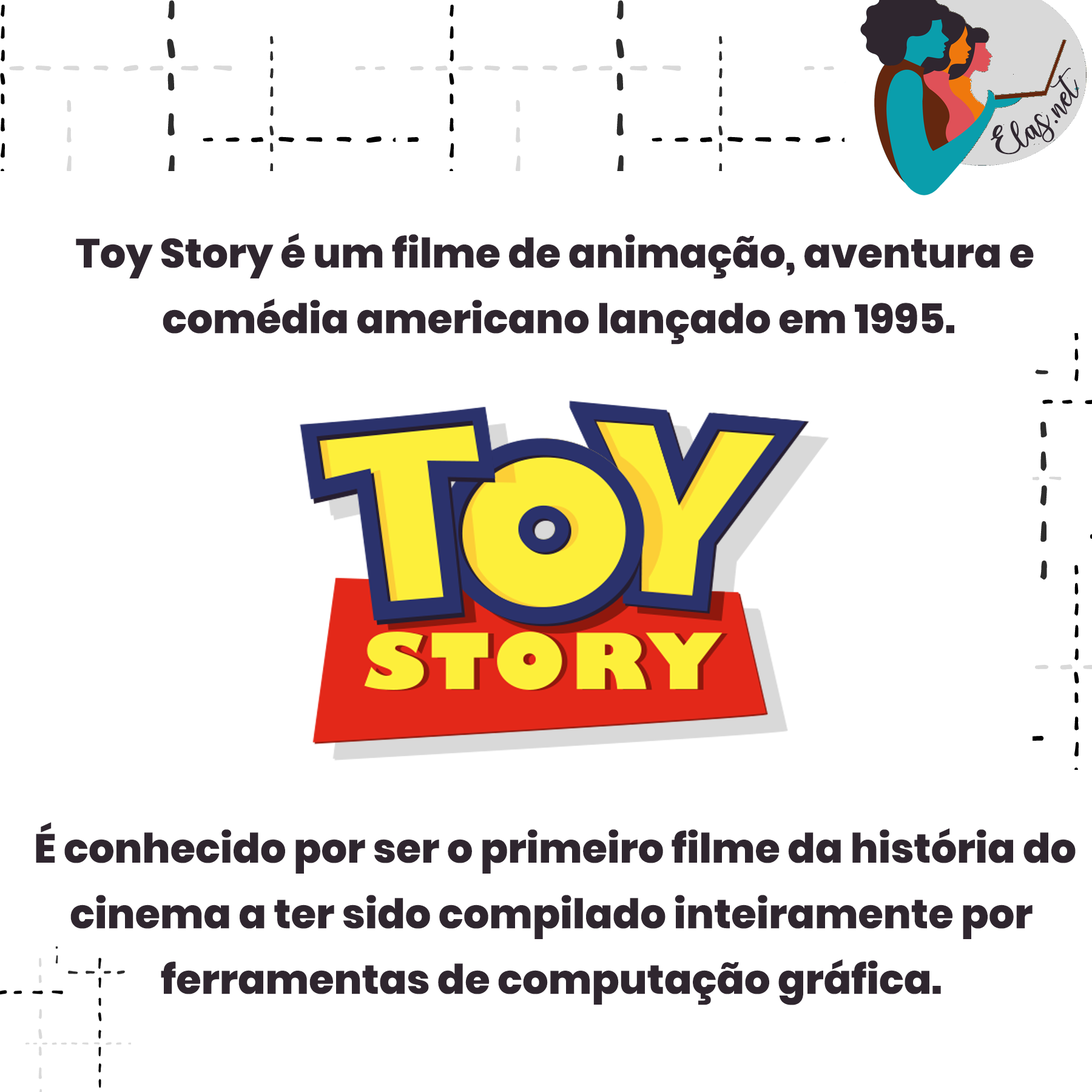
<style>
.page{position:relative;width:1092px;height:1092px;background:#ffffff}
.page>*{position:absolute;margin:0}
.t1{font:25px "charlinda-Regular";color:#2f262f;scale:1.18 1}
.t2{font:40.6px/65.5px "Poppins-ExtraBold";color:#2f262f}
</style>
<div class="page">
<p class="t1" style="left:991px;top:67px;width:88px;height:88px;rotate:-42deg">Elas.net</p>
<p class="t2" style="left:76px;top:233px;width:958px;height:112px;text-align:center">Toy Story é um filme de animação, aventura e <br>comédia americano lançado em 1995.</p>
<p class="t2" style="left:36px;top:822px;width:1040px;height:183px;text-align:center">É conhecido por ser o primeiro filme da história do <br>cinema a ter sido compilado inteiramente por <br>ferramentas de computação gráfica.</p>
</div>
